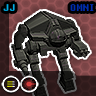
<style>
.page{position:relative;width:96px;height:96px}
.page>*{position:absolute;margin:0}
.t1{font:10px "Fixedsys";color:#00afe7}
.t2{font:10px "Fixedsys";color:#012db0}
</style>
<div class="page">
<p class="t1" style="left:3px;top:4px;width:12px;height:7px">JJ</p>
<p class="t2" style="left:70px;top:4px;width:24px;height:7px">OMNI</p>
</div>
